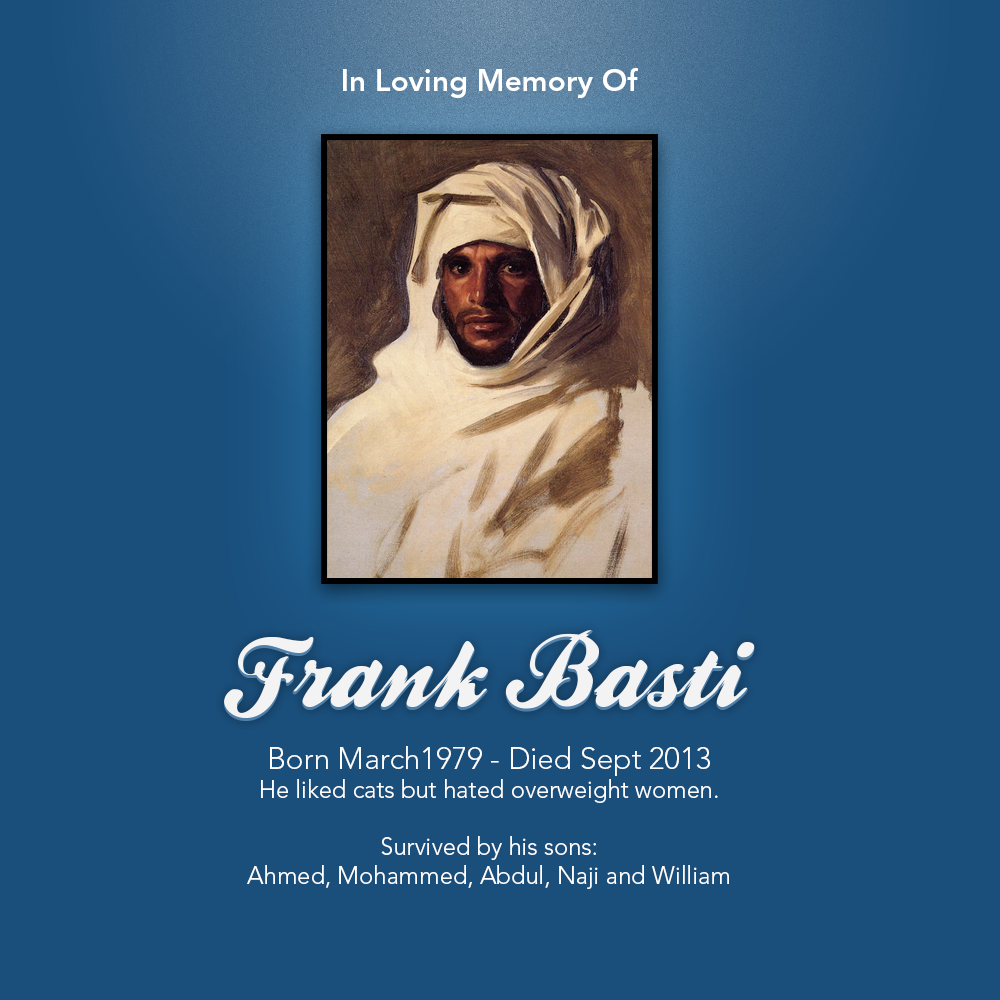
<style>
.page{position:relative;width:1000px;height:1000px;background:#1a4f7c}
.page>*{position:absolute;margin:0}
.t1{font:30px "AvenirLTStd-Heavy";letter-spacing:-0.002em;color:#ffffff}
.t2{font:105px "BallparkWeiner";letter-spacing:-0.002em;color:#ffffff}
.t3{font:24px "AvenirLTStd-Light";letter-spacing:-0.002em;color:#ffffff}
.t4{font:30px "AvenirLTStd-Light";letter-spacing:-0.002em;color:#ffffff}
</style>
<div class="page">
<p class="t1" style="left:343px;top:68px;width:295px;height:30px">In Loving Memory Of</p>
<p class="t2" style="left:224px;top:630px;width:531px;height:91px">Frank Basti</p>
<p class="t3" style="left:247px;top:746px;width:482px;height:143px;text-align:center"><span class="t4">Born March1979 - Died Sept 2013<br></span>He liked cats but hated overweight women.<br><br>Survived by his sons:<br>Ahmed, Mohammed, Abdul, Naji and William</p>
</div>
